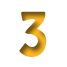
<style>
.page{position:relative;width:67px;height:67px;background:#ffffff}
.page>*{position:absolute;margin:0}
.t1{font:54.3px "HoboStd";letter-spacing:0.01em}
</style>
<div class="page">
<p class="t1" style="left:19px;top:11px;width:28px;height:46px">3</p>
</div>
